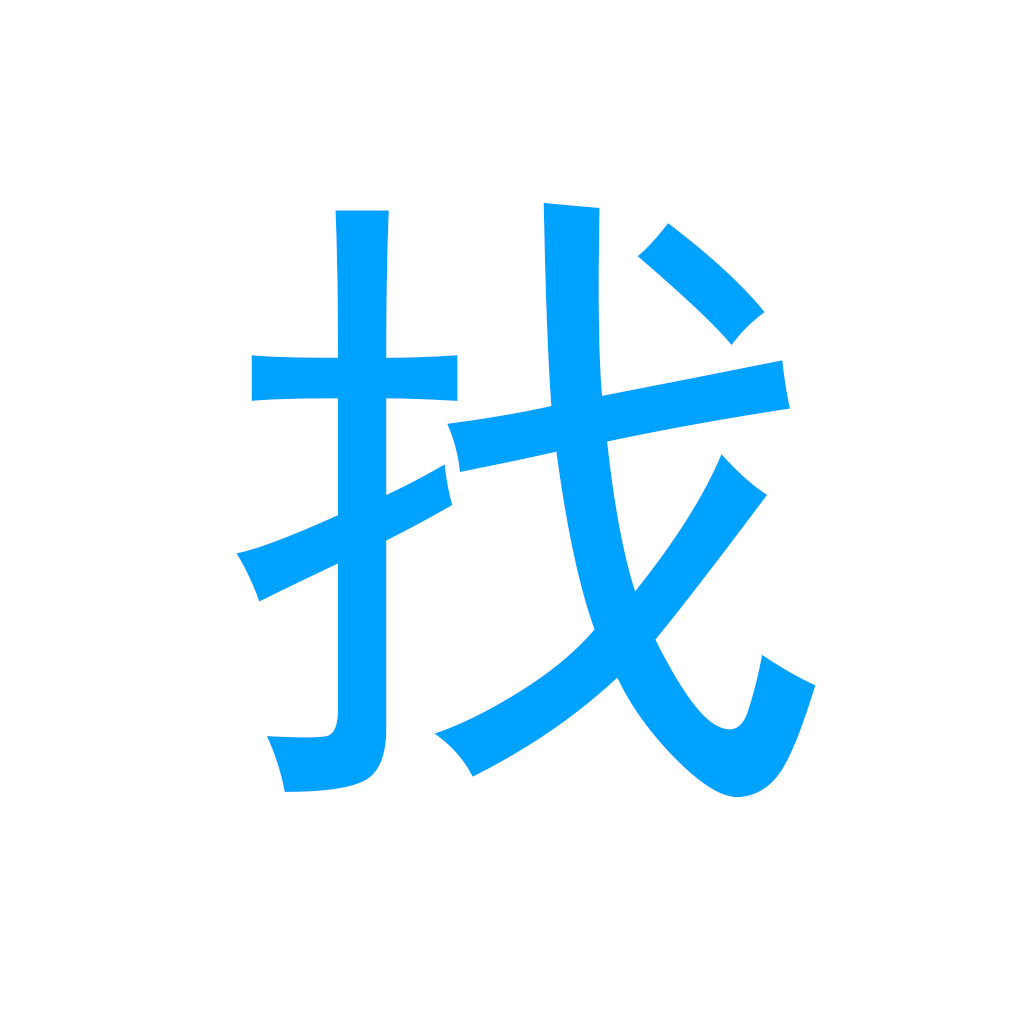
<style>
.page{position:relative;width:1024px;height:1024px;background:#ffffff}
.page>*{position:absolute;margin:0}
.t1{font:650px "SimHei";color:#00a2ff}
</style>
<div class="page">
<p class="t1" style="left:236px;top:202px;width:580px;height:596px">找</p>
</div>
